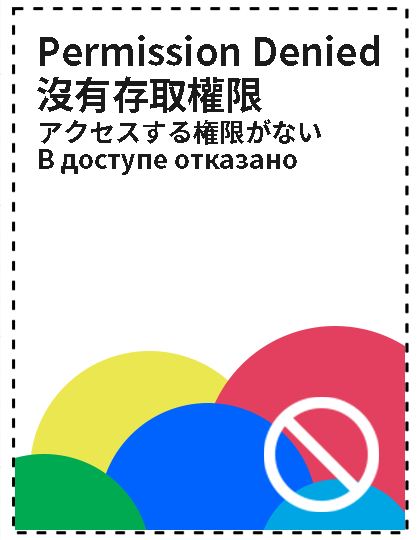
<style>
.page{position:relative;width:420px;height:540px;background:#ffffff}
.page>*{position:absolute;margin:0}
.t1{font:38px "NotoSansCJKtc-Bold";color:#1b1b1b}
.t2{font:26px/27px "NotoSansCJKtc-Bold";color:#1b1b1b}
</style>
<div class="page">
<p class="t1" style="left:40px;top:35px;width:339px;height:31px">Permission Denied</p>
<p class="t1" style="left:37px;top:76px;width:225px;height:37px">沒有存取權限</p>
<p class="t2" style="left:39px;top:119px;width:282px;height:56px">アクセスする権限がない<br>В доступе отказано</p>
</div>
